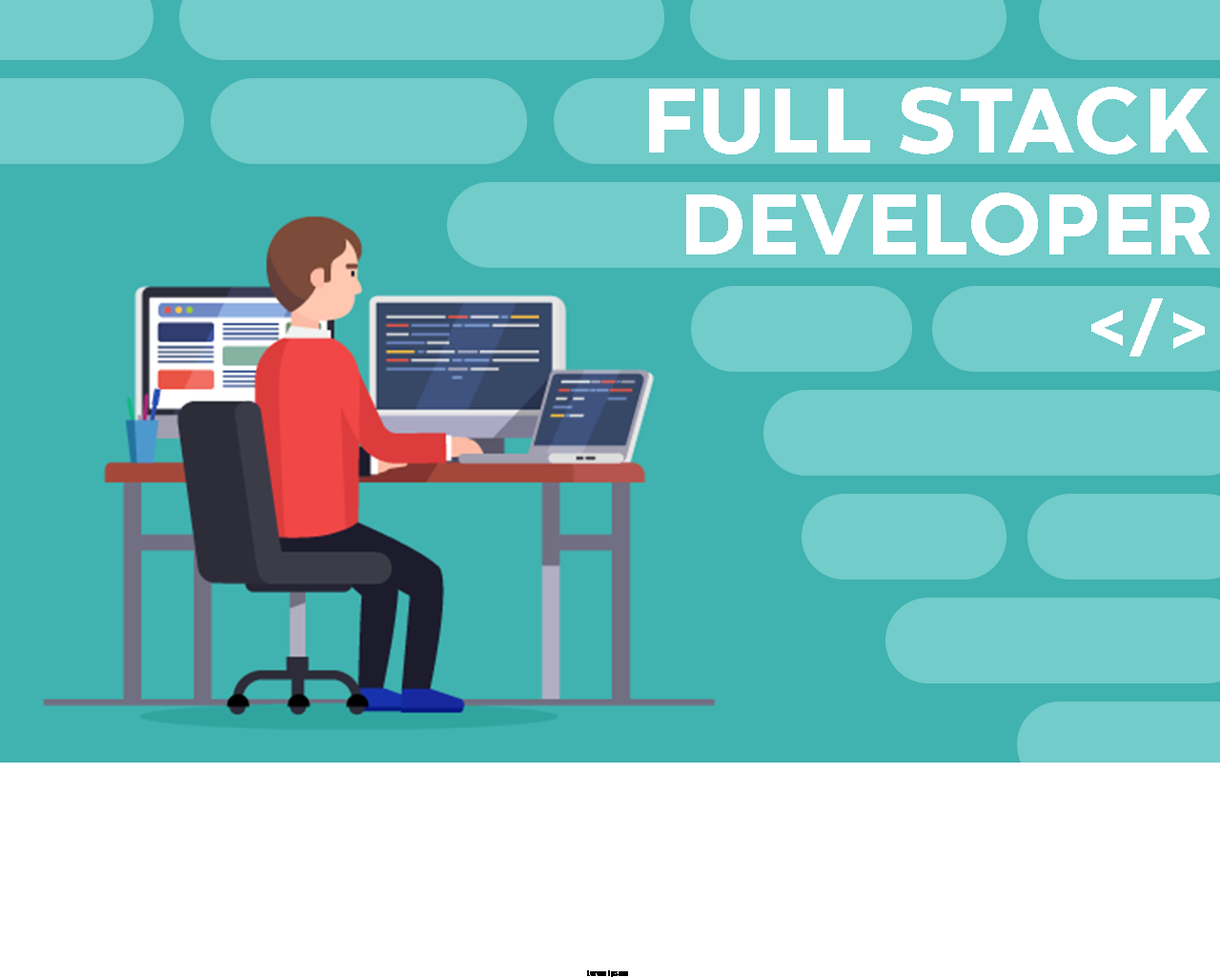
<style>
.page{position:relative;width:1220px;height:977px;background:#40b2af}
.page>*{position:absolute;margin:0}
.t1{font:96.3px "CodecWarmTrial-ExtraBold";letter-spacing:0.02em;color:#ffffff}
.t2{font:90.6px "CodecWarmTrial-ExtraBold";letter-spacing:0.02em;color:#ffffff}
.t3{font:72.3px "CodecWarmTrial-ExtraBold";letter-spacing:0.02em;color:#ffffff}
.t4{font:7.6px "Impact";letter-spacing:0.02em;color:#000000}
</style>
<div class="page">
<p class="t1" style="left:649px;top:87px;width:560px;height:67px">FULL STACK</p>
<p class="t2" style="left:686px;top:193px;width:525px;height:62px">DEVELOPER</p>
<p class="t3" style="left:1092px;top:298px;width:113px;height:59px">&lt;/&gt;</p>
<p class="t4" style="left:587px;top:971px;width:41px;height:6px">Lorem Ipsum</p>
</div>
